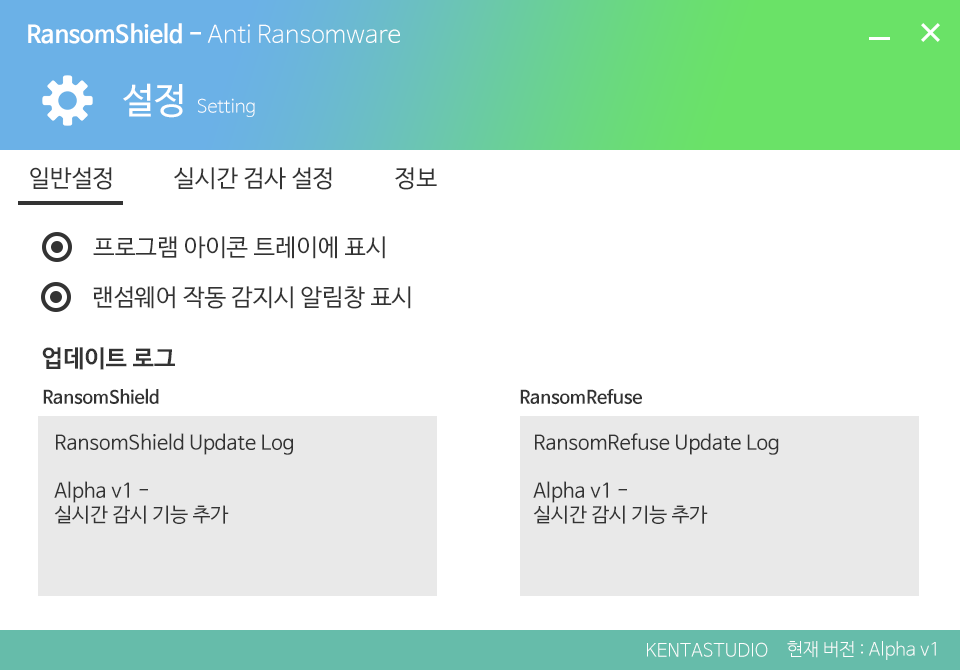
<style>
.page{position:relative;width:960px;height:670px;background:#ffffff}
.page>*{position:absolute;margin:0}
.t1{font:24px "NanumBarunGothicLight";color:#ffffff}
.t2{font:24px "NanumBarunGothicBold";color:#ffffff}
.t3{font:36px "NanumBarunGothic";color:#ffffff}
.t4{font:18px "NanumBarunGothicLight";color:#ffffff}
.t5{font:24px "NanumBarunGothic";color:#333333}
.t6{font:24px "NanumBarunGothicBold";color:#333333}
.t7{font:18px "NanumBarunGothicBold";color:#333333}
.t8{font:20px "NanumBarunGothic";color:#333333}
.t9{font:18px "NanumBarunGothicLight";color:#fefefe}
</style>
<div class="page">
<p class="t1" style="left:28px;top:23px;width:372px;height:21px"><span class="t2">RansomShield - </span>Anti Ransomware</p>
<p class="t3" style="left:123px;top:83px;width:60px;height:35px">설정</p>
<p class="t4" style="left:198px;top:98px;width:57px;height:19px">Setting</p>
<p class="t5" style="left:30px;top:167px;width:82px;height:23px">일반설정</p>
<p class="t5" style="left:174px;top:167px;width:158px;height:23px">실시간 검사 설정</p>
<p class="t5" style="left:395px;top:167px;width:42px;height:23px">정보</p>
<p class="t5" style="left:93px;top:236px;width:292px;height:23px">프로그램 아이콘 트레이에 표시</p>
<p class="t5" style="left:93px;top:286px;width:318px;height:23px">랜섬웨어 작동 감지시 알림창 표시</p>
<p class="t6" style="left:42px;top:347px;width:133px;height:23px">업데이트 로그</p>
<p class="t7" style="left:43px;top:388px;width:116px;height:17px">RansomShield</p>
<p class="t7" style="left:520px;top:389px;width:122px;height:16px">RansomRefuse</p>
<p class="t8" style="left:54px;top:433px;width:239px;height:91px">RansomShield Update Log<br><br>Alpha v1 -<br>실시간 감시 기능 추가</p>
<p class="t8" style="left:533px;top:433px;width:246px;height:91px">RansomRefuse Update Log<br><br>Alpha v1 -<br>실시간 감시 기능 추가</p>
<p class="t9" style="left:787px;top:641px;width:149px;height:19px">현재 버전 : Alpha v1</p>
<p class="t9" style="left:647px;top:642px;width:121px;height:15px">KENTASTUDIO</p>
</div>
